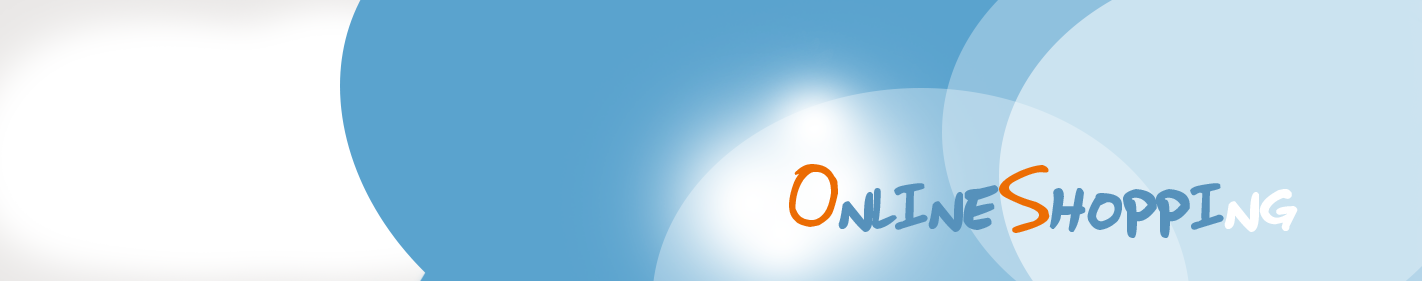
<style>
.page{position:relative;width:1422px;height:281px;background:#cbe3f0}
.page>*{position:absolute;margin:0}
.t1{font:72px "AbjectFailure";color:#5691bb}
.t2{font:72px "AbjectFailure";color:#eb6c03}
.t3{font:72px "AbjectFailure";color:#ec6d04}
.t4{font:72px "AbjectFailure";color:#ffffff}
</style>
<div class="page">
<p class="t1" style="left:789px;top:164px;width:509px;height:74px"><span class="t2">O</span>nline<span class="t3">S</span>hoppi<span class="t4">ng</span></p>
</div>
